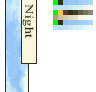
<style>
.page{position:relative;width:96px;height:92px;background:#ffffff}
.page>*{position:absolute;margin:0}
.t1{font:11.7px "TimesNewRomanPSMT";letter-spacing:0.025em;color:#303010;scale:1.22 1}
</style>
<div class="page">
<p class="t1" style="left:22px;top:4px;width:12px;height:34px;rotate:90deg">Night</p>
</div>
